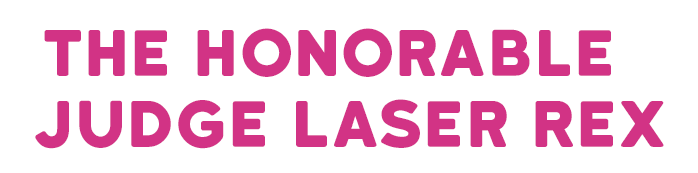
<style>
.page{position:relative;width:698px;height:173px;background:#ffffff}
.page>*{position:absolute;margin:0}
.t1{font:62.3px/71px "KatahdinRound-Regular";color:#d23385}
</style>
<div class="page">
<p class="t1" style="left:35px;top:28px;width:629px;height:121px;text-align:center">The Honorable <br> Judge LAser REx</p>
</div>
